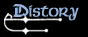
<style>
.page{position:relative;width:88px;height:37px;background:#000000}
.page>*{position:absolute;margin:0}
.t1{font:18px "Celtic-CondensedNormal";color:#94b2da}
.t2{font:18px "CathedralExtendedNormal";color:#94b2da}
</style>
<div class="page">
<p class="t1" style="left:13px;top:4px;width:66px;height:17px"><span class="t2">D</span>istory</p>
</div>
